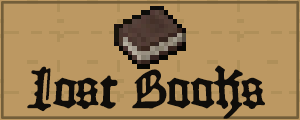
<style>
.page{position:relative;width:300px;height:120px;background:#bc9862}
.page>*{position:absolute;margin:0}
.t1{font:52px "1454GutenbergBibel";color:#0f0d0a}
</style>
<div class="page">
<p class="t1" style="left:27px;top:65px;width:238px;height:54px">Lost Books</p>
</div>
